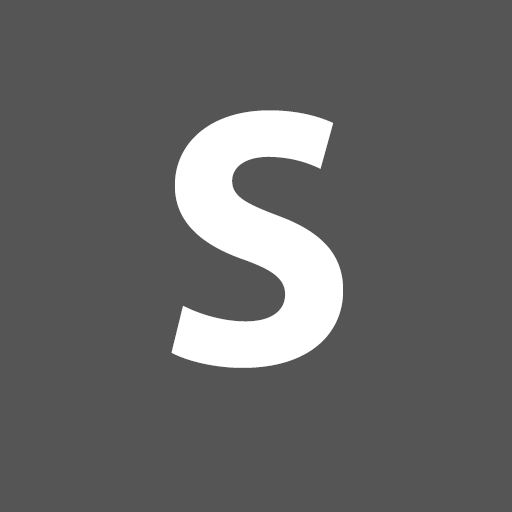
<style>
.page{position:relative;width:512px;height:512px;background:#555555}
.page>*{position:absolute;margin:0}
.t1{font:370px "MyriadPro-Bold";color:#ffffff}
</style>
<div class="page">
<p class="t1" style="left:171px;top:110px;width:172px;height:258px">S</p>
</div>
